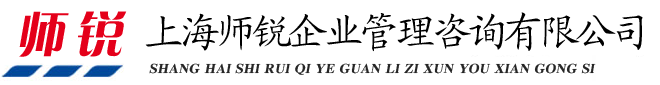
<style>
.page{position:relative;width:660px;height:85px;background:#ffffff}
.page>*{position:absolute;margin:0}
.t1{font:48px "FZCQJW--GB1-0";letter-spacing:0.2em;color:#e4001a;font-style:italic}
.t2{font:40px "KaiTi_GB2312";letter-spacing:-0.1em;color:#000000}
.t3{font:14px "DFPYaSongW9";color:#262626;font-style:italic}
</style>
<div class="page">
<p class="t1" style="left:19px;top:11px;width:108px;height:46px">师锐</p>
<p class="t2" style="left:145px;top:12px;width:498px;height:40px">上海师锐企业管理咨询有限公司</p>
<p class="t3" style="left:149px;top:63px;width:447px;height:12px">SHANG HAI SHI RUI QI YE GUAN LI ZI XUN YOU XIAN GONG SI</p>
</div>
